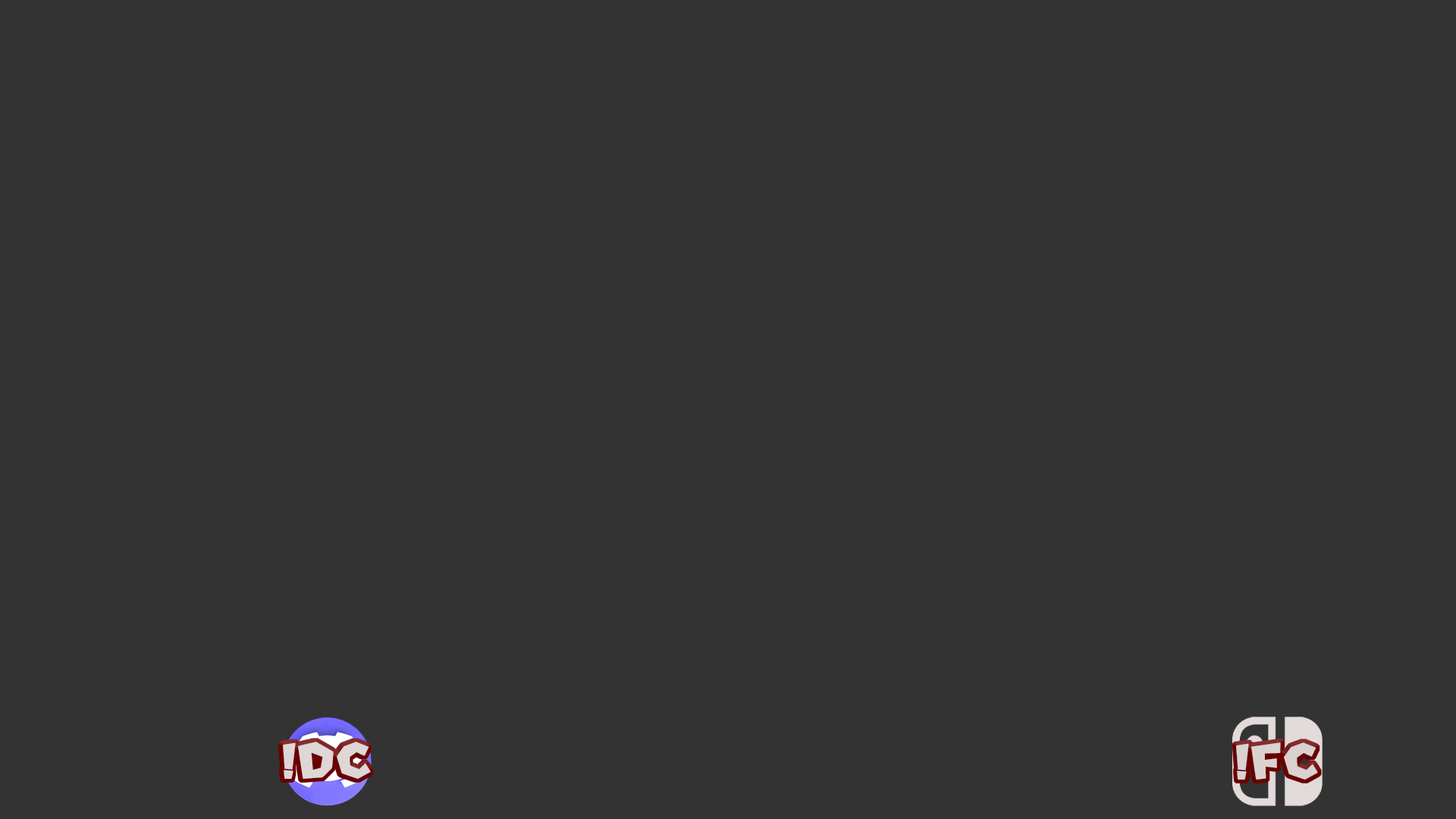
<style>
.page{position:relative;width:1456px;height:819px;background:#333333}
.page>*{position:absolute;margin:0}
.t1{font:58.1px "NewSuperMarioFontU";color:#dfd6d6}
.t2{font:58.1px "NewSuperMarioFontU";color:#dad1d1}
</style>
<div class="page">
<p class="t1" style="left:283px;top:742px;width:88px;height:37px">!DC</p>
<p class="t2" style="left:1236px;top:742px;width:82px;height:38px">!FC</p>
</div>
